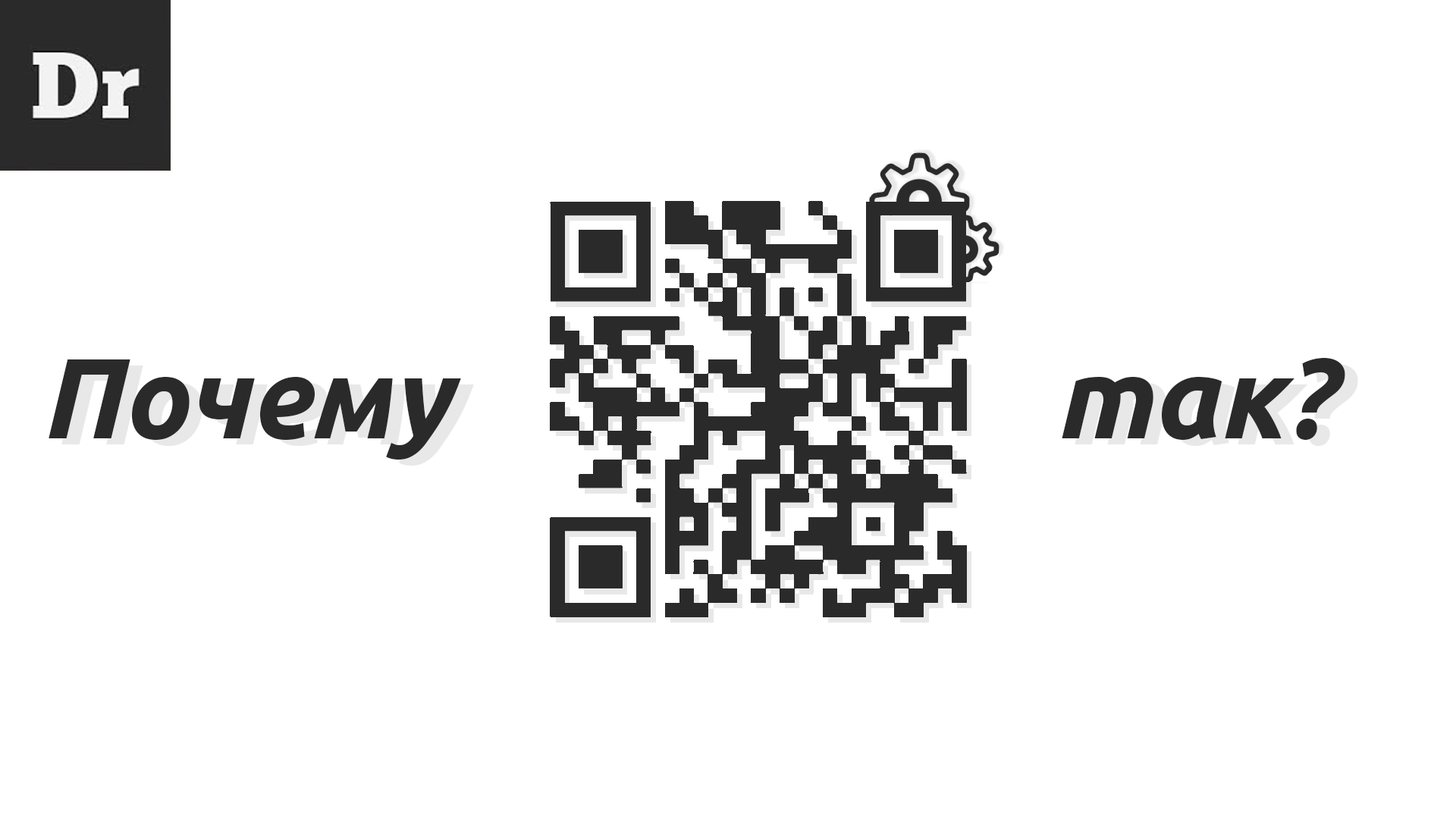
<style>
.page{position:relative;width:1456px;height:819px;background:#ffffff}
.page>*{position:absolute;margin:0}
.t1{font:113.7px "Ubuntu-BoldItalic";color:#2a2a2a}
</style>
<div class="page">
<p class="t1" style="left:49px;top:359px;width:412px;height:101px">Почему</p>
<p class="t1" style="left:1062px;top:358px;width:283px;height:82px">так?</p>
</div>
